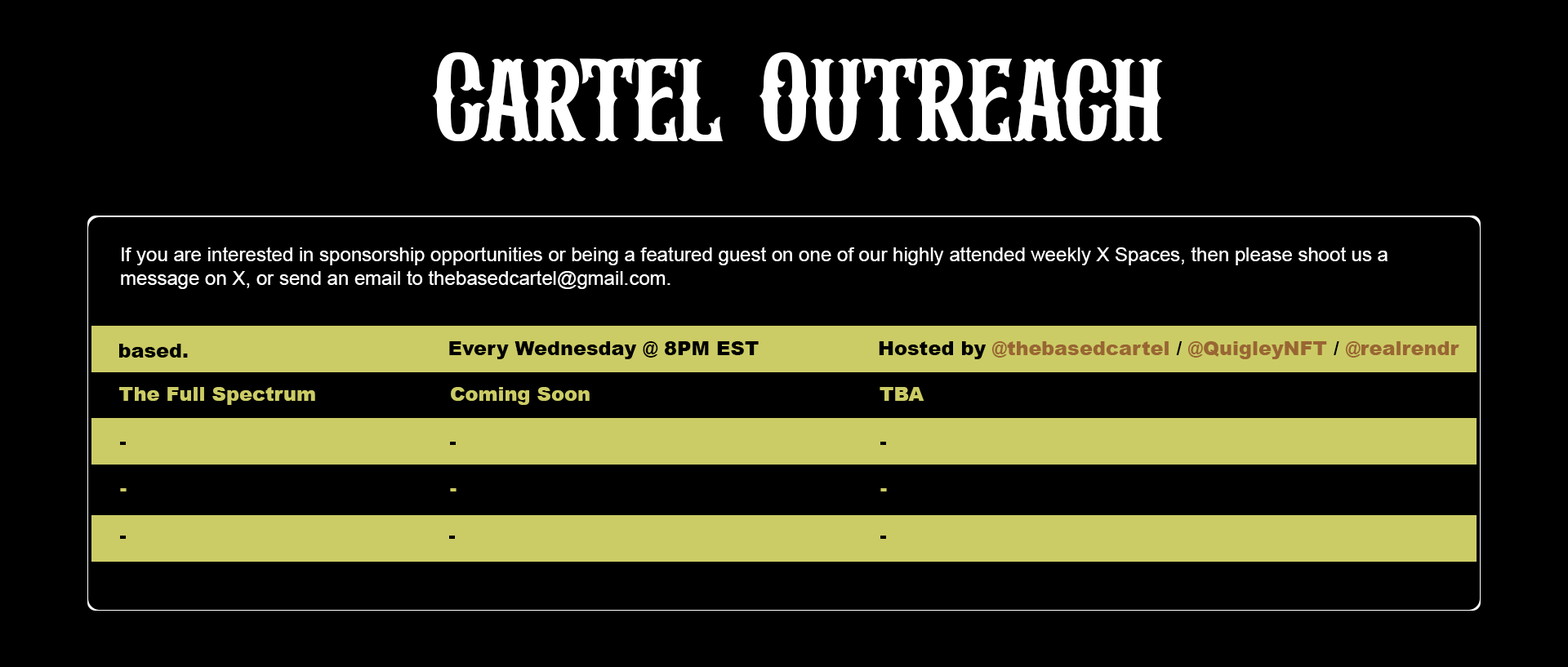
<style>
.page{position:relative;width:1568px;height:667px;background:#000000}
.page>*{position:absolute;margin:0}
.t1{font:122.5px "Albertson";color:#ffffff}
.t2{font:19.6px "ArialMT";color:#ffffff}
.t3{font:19.6px "Arial-Black";color:#000000}
.t4{font:19.6px "Arial-Black";color:#996633}
.t5{font:19.6px "Arial-Black";color:#cccc66}
</style>
<div class="page">
<p class="t1" style="left:432px;top:52px;width:731px;height:89px">Cartel Outreach</p>
<p class="t2" style="left:121px;top:247px;width:1267px;height:42px">If you are interested in sponsorship opportunities or being a featured guest on one of our highly attended weekly X Spaces, then please shoot us a <br>message on X, or send an email to thebasedcartel@gmail.com.</p>
<p class="t3" style="left:449px;top:341px;width:310px;height:18px">Every Wednesday @ 8PM EST</p>
<p class="t4" style="left:879px;top:341px;width:580px;height:18px"><span class="t3">Hosted by </span>@thebasedcartel<span class="t3"> / </span>@QuigleyNFT<span class="t3"> / </span>@realrendr</p>
<p class="t3" style="left:119px;top:344px;width:69px;height:14px">based.</p>
<p class="t5" style="left:119px;top:387px;width:196px;height:18px">The Full Spectrum</p>
<p class="t5" style="left:451px;top:387px;width:139px;height:18px">Coming Soon</p>
<p class="t5" style="left:880px;top:387px;width:44px;height:14px">TBA</p>
<p class="t5" style="left:120px;top:488px;width:7px;height:4px">-</p>
<p class="t5" style="left:450px;top:488px;width:7px;height:4px">-</p>
<p class="t5" style="left:880px;top:488px;width:7px;height:4px">-</p>
</div>
